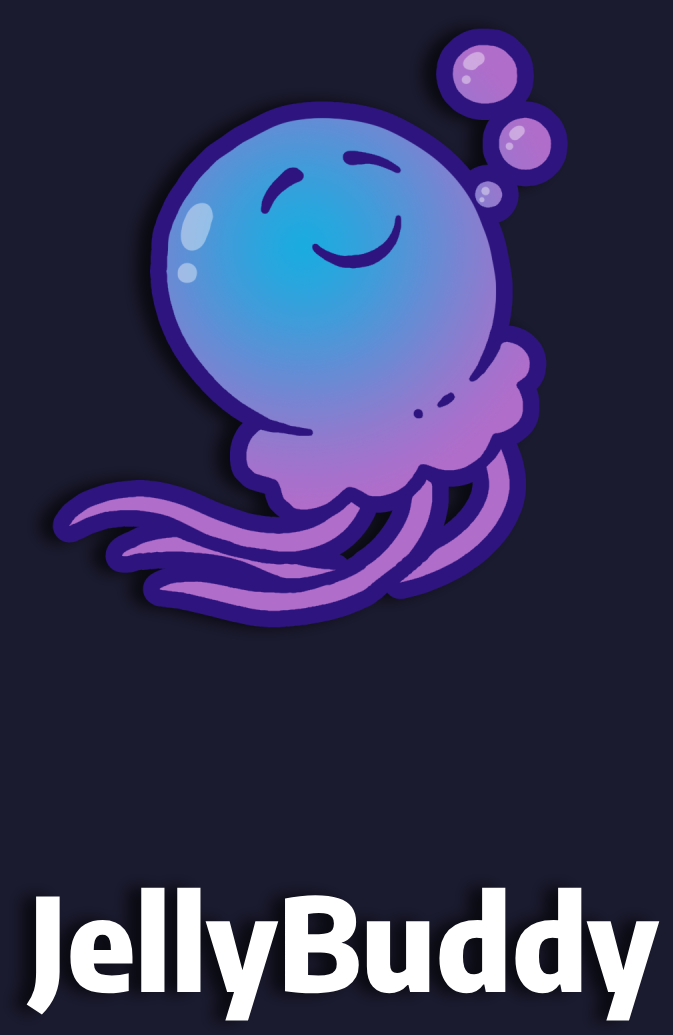
<style>
.page{position:relative;width:673px;height:1035px;background:#1b1b30}
.page>*{position:absolute;margin:0}
.t1{font:129px "EncodeSansSemiCondensed-ExtraBold";color:#ffffff}
</style>
<div class="page">
<p class="t1" style="left:26px;top:887px;width:634px;height:134px">JellyBuddy</p>
</div>
